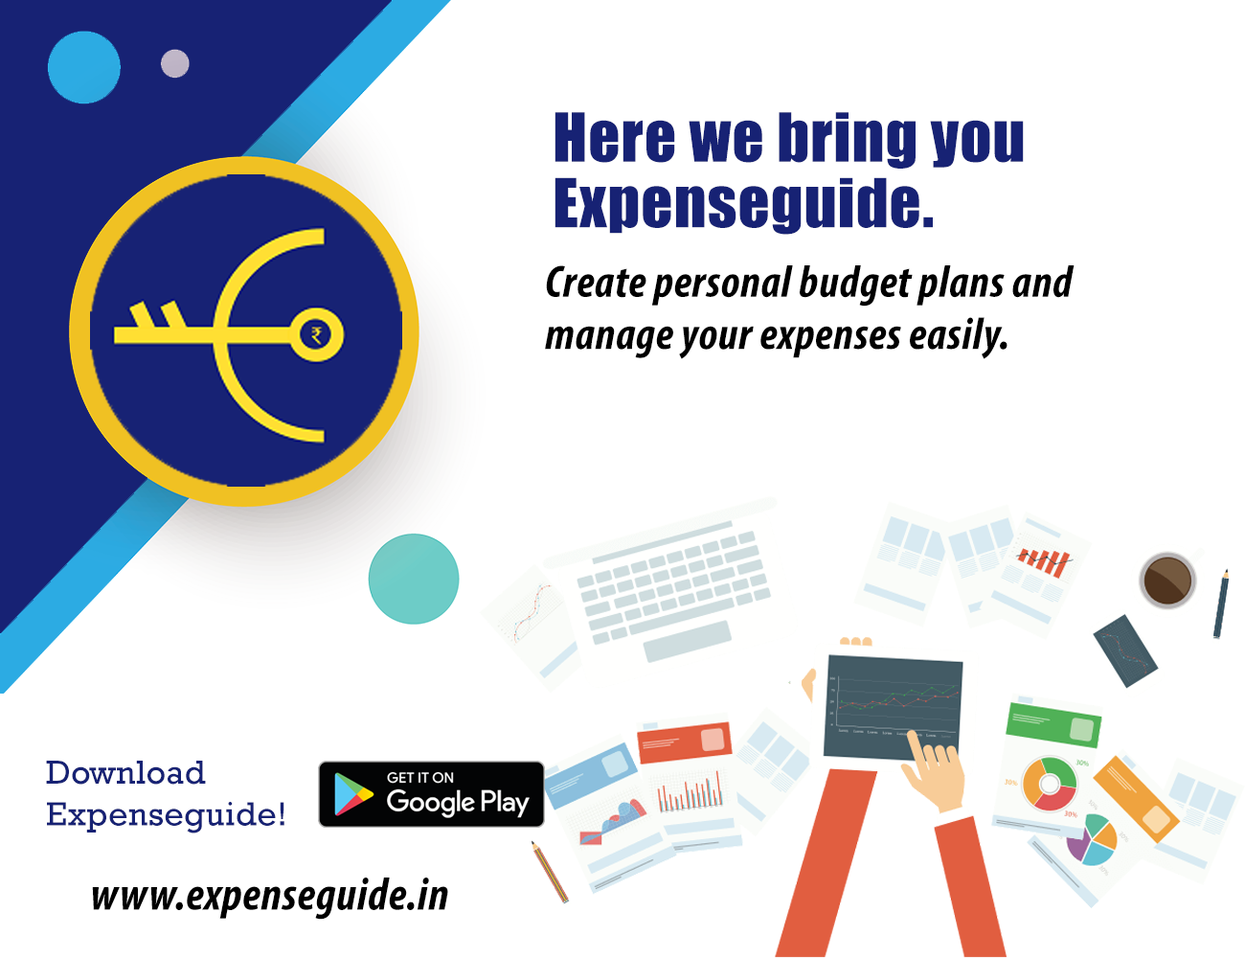
<style>
.page{position:relative;width:1245px;height:958px;background:#ffffff}
.page>*{position:absolute;margin:0}
.t1{font:62.5px/65.7px "Impact";letter-spacing:0.015em;color:#172274}
.t2{font:45.3px/52.3px "MyriadPro-BoldCondIt";letter-spacing:0.015em;color:#000000}
.t3{font:33.8px/41.8px "Rockwell";letter-spacing:0.015em;color:#172274}
.t4{font:46.3px "MyriadPro-BoldCondIt";letter-spacing:0.015em;color:#000000}
</style>
<div class="page">
<p class="t1" style="left:555px;top:112px;width:469px;height:123px">Here we bring you Expenseguide.</p>
<p class="t2" style="left:545px;top:265px;width:530px;height:94px">Create personal budget plans and manage your expenses easily.</p>
<p class="t3" style="left:46px;top:760px;width:238px;height:73px">Download    Expenseguide!</p>
<p class="t4" style="left:92px;top:877px;width:356px;height:42px">www.expenseguide.in</p>
</div>
